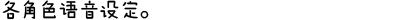
<style>
.page{position:relative;width:416px;height:20px;background:#ffffff}
.page>*{position:absolute;margin:0}
.t1{font:22px "¢è?";color:#000000}
</style>
<div class="page">
<p class="t1" style="left:2px;top:0px;width:147px;height:20px">各角色语音设定。</p>
</div>
